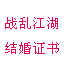
<style>
.page{position:relative;width:64px;height:64px;background:#ffffff}
.page>*{position:absolute;margin:0}
.t1{font:12.6px "NSimSun";color:#d70a57}
</style>
<div class="page">
<p class="t1" style="left:5px;top:17px;width:53px;height:12px">战乱江湖</p>
<p class="t1" style="left:5px;top:42px;width:54px;height:12px">结婚证书</p>
</div>
